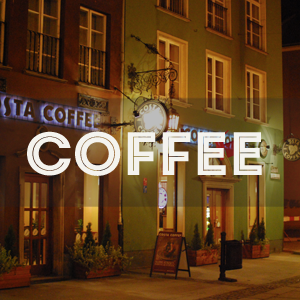
<style>
.page{position:relative;width:300px;height:300px}
.page>*{position:absolute;margin:0}
.t1{font:61px "Intro-Inline";letter-spacing:-0.02em;color:#f4f3ee;scale:1.04 1}
</style>
<div class="page">
<p class="t1" style="left:27px;top:131px;width:235px;height:45px">coffee</p>
</div>
